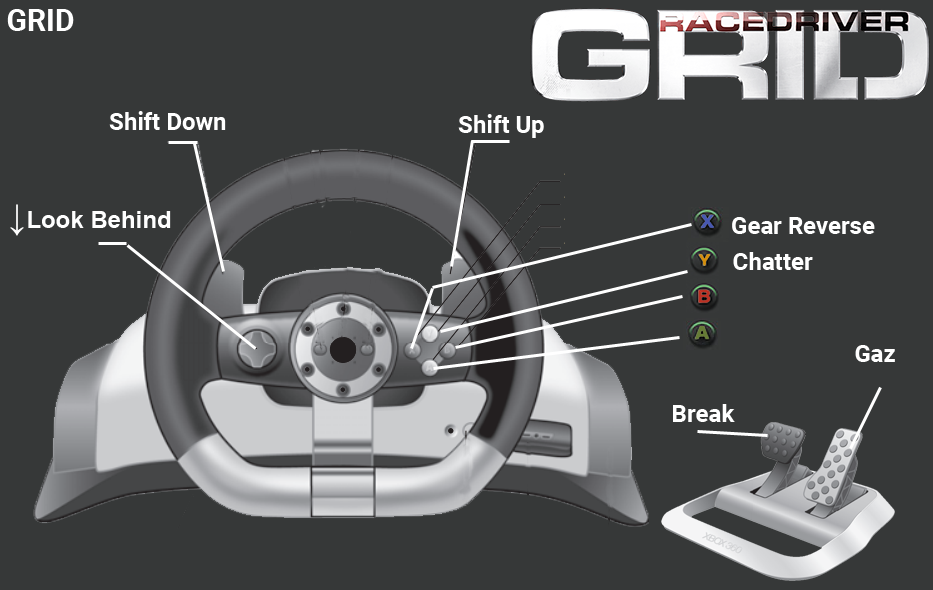
<style>
.page{position:relative;width:933px;height:590px;background:#363838}
.page>*{position:absolute;margin:0}
.t1{font:30px "Roboto-Bold";color:#ffffff}
.t2{font:24px "Roboto-Bold";color:#ffffff}
.t3{font:24px "Arial-BoldMT";color:#ffffff}
.t4{font:36px "Arial-BoldMT";color:#ffffff}
</style>
<div class="page">
<p class="t1" style="left:7px;top:9px;width:67px;height:22px">GRID</p>
<p class="t2" style="left:109px;top:111px;width:117px;height:19px">Shift Down</p>
<p class="t2" style="left:458px;top:114px;width:86px;height:24px">Shift Up</p>
<p class="t3" style="left:10px;top:204px;width:161px;height:32px"><span class="t4">↓</span>Look Behind</p>
<p class="t2" style="left:732px;top:217px;width:143px;height:17px">Gear Reverse</p>
<p class="t2" style="left:733px;top:252px;width:80px;height:18px">Chatter</p>
<p class="t2" style="left:855px;top:345px;width:40px;height:17px">Gaz</p>
<p class="t2" style="left:673px;top:404px;width:62px;height:18px">Break</p>
</div>
